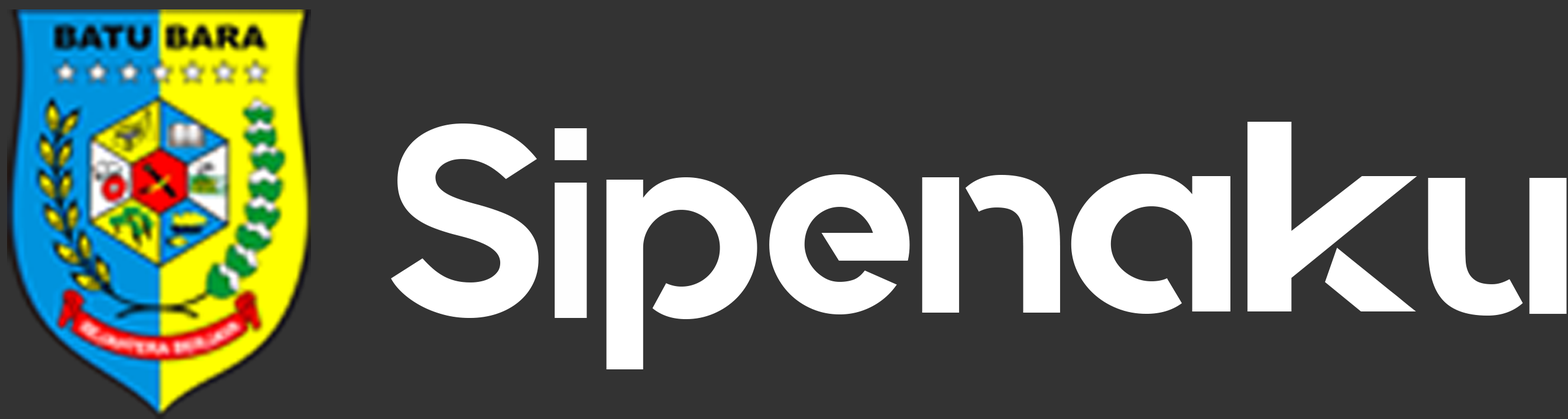
<style>
.page{position:relative;width:1568px;height:419px;background:#333333}
.page>*{position:absolute;margin:0}
.t1{font:271px "Quantify";color:#ffffff}
.t2{font:271px "Quantify";color:#ffffff;scale:1.23 1}
.t3{font:271px "Quantify";color:#fefefe;scale:0.89 1}
.t4{font:271px "Quantify";color:#ffffff;scale:1.07 1}
</style>
<div class="page">
<p class="t1" style="left:391px;top:124px;width:148px;height:194px">S</p>
<p class="t2" style="left:1247px;top:122px;width:170px;height:190px">k</p>
<p class="t3" style="left:555px;top:128px;width:32px;height:190px">i</p>
<p class="t4" style="left:1071px;top:174px;width:159px;height:140px">a</p>
<p class="t1" style="left:606px;top:177px;width:151px;height:193px">p</p>
<p class="t1" style="left:769px;top:174px;width:141px;height:141px">e</p>
<p class="t1" style="left:922px;top:175px;width:138px;height:138px">n</p>
<p class="t1" style="left:1428px;top:178px;width:139px;height:138px">u</p>
</div>
